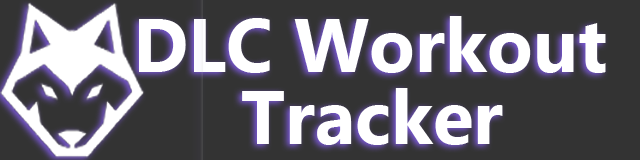
<style>
.page{position:relative;width:640px;height:160px;background:#333333}
.page>*{position:absolute;margin:0}
.t1{font:75px "MicrosoftNewTaiLue-Bold";color:#ffffff}
</style>
<div class="page">
<p class="t1" style="left:139px;top:16px;width:467px;height:57px">DLC Workout</p>
<p class="t1" style="left:242px;top:88px;width:261px;height:57px">Tracker</p>
</div>
